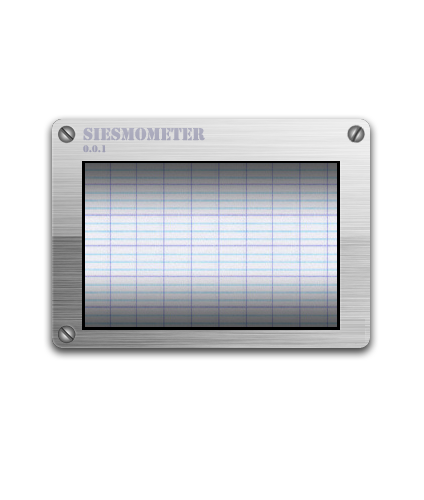
<style>
.page{position:relative;width:424px;height:500px;background:#ffffff}
.page>*{position:absolute;margin:0}
.t1{font:18px "Stencil";color:#ababbd}
.t2{font:10px "Stencil";color:#ababbd}
</style>
<div class="page">
<p class="t1" style="left:83px;top:127px;width:122px;height:26px">siesmometer<br><span class="t2">0.0.1</span></p>
</div>
